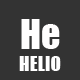
<style>
.page{position:relative;width:80px;height:80px;background:#333333}
.page>*{position:absolute;margin:0}
.t1{font:38.4px "Impact";color:#fffefe}
.t2{font:19.2px "Impact";color:#ffffff}
</style>
<div class="page">
<p class="t1" style="left:21px;top:19px;width:39px;height:30px">He</p>
<p class="t2" style="left:19px;top:56px;width:42px;height:15px">HELIO</p>
</div>
